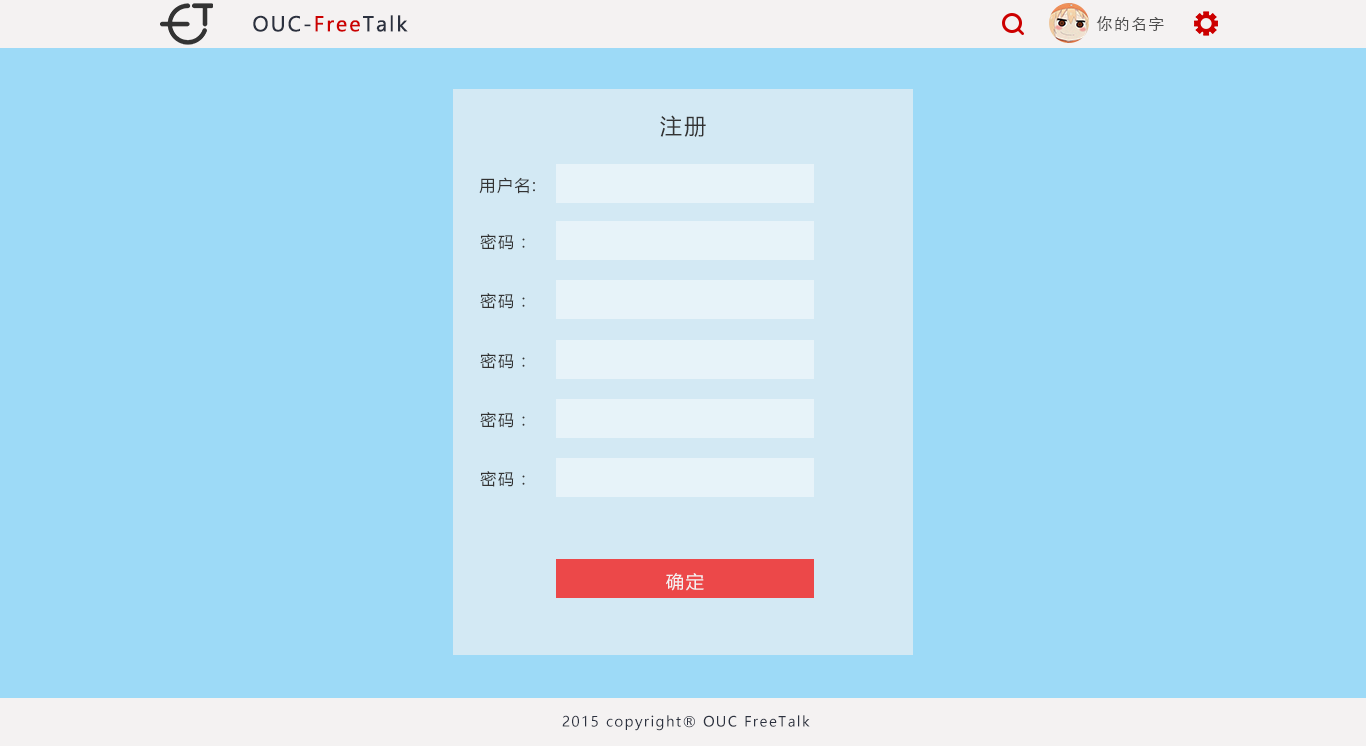
<style>
.page{position:relative;width:1366px;height:746px;background:#9ddaf7}
.page>*{position:absolute;margin:0}
.t1{font:20px "MicrosoftYaHei";letter-spacing:0.1em;color:#2b313f}
.t2{font:20px "MicrosoftYaHei";letter-spacing:0.1em;color:#cc0000}
.t3{font:16px "DengXian-Regular";letter-spacing:0.075em;color:#4c4c4c}
.t4{font:22px "MicrosoftYaHei";letter-spacing:0.1em;color:#333333}
.t5{font:16px "MicrosoftYaHei";letter-spacing:0.1em;color:#333333}
.t6{font:18px "MicrosoftYaHei";letter-spacing:0.1em;color:#f4f2f2}
.t7{font:14px "MicrosoftYaHei";letter-spacing:0.1em;color:#2b313f}
</style>
<div class="page">
<p class="t1" style="left:253px;top:15px;width:155px;height:17px">OUC-<span class="t2">Free</span>Talk</p>
<p class="t3" style="left:1096px;top:16px;width:68px;height:15px">你的名字</p>
<p class="t4" style="left:660px;top:115px;width:46px;height:22px">注册</p>
<p class="t5" style="left:479px;top:177px;width:56px;height:17px">用户名:</p>
<p class="t5" style="left:480px;top:234px;width:45px;height:16px">密码：</p>
<p class="t5" style="left:480px;top:293px;width:45px;height:16px">密码：</p>
<p class="t5" style="left:480px;top:353px;width:45px;height:16px">密码：</p>
<p class="t5" style="left:480px;top:412px;width:45px;height:16px">密码：</p>
<p class="t5" style="left:480px;top:471px;width:45px;height:16px">密码：</p>
<p class="t6" style="left:666px;top:573px;width:38px;height:18px">确定</p>
<p class="t7" style="left:562px;top:715px;width:248px;height:16px">2015 copyright® OUC FreeTalk</p>
</div>
